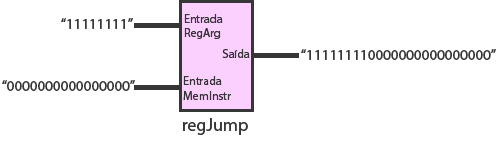
<style>
.page{position:relative;width:496px;height:144px;background:#ffffff}
.page>*{position:absolute;margin:0}
.t1{font:12px "MyriadHebrew-Regular";color:#363636}
.t2{font:15px "MyriadHebrew-Regular";color:#363636}
.t3{font:18px "MyriadHebrew-Regular";color:#363636}
</style>
<div class="page">
<p class="t1" style="left:184px;top:14px;width:39px;height:25px;text-align:right">Entrada<br>RegArg</p>
<p class="t2" style="left:61px;top:18px;width:72px;height:11px">“11111111”</p>
<p class="t1" style="left:222px;top:49px;width:28px;height:9px">Saída</p>
<p class="t2" style="left:301px;top:49px;width:195px;height:11px">“111111110000000000000000”</p>
<p class="t1" style="left:183px;top:76px;width:48px;height:24px;text-align:right">Entrada<br>MemInstr</p>
<p class="t2" style="left:2px;top:80px;width:133px;height:11px">“0000000000000000”</p>
<p class="t3" style="left:183px;top:118px;width:65px;height:17px">regJump</p>
</div>
